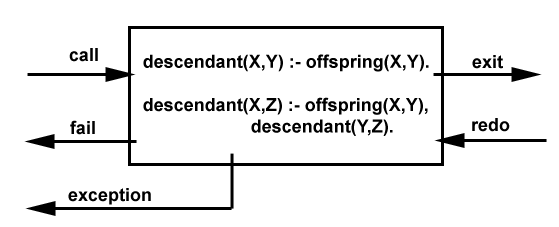
<style>
.page{position:relative;width:559px;height:227px;background:#ffffff}
.page>*{position:absolute;margin:0}
.t1{font:18px "Arial-BoldMT";color:#000000}
</style>
<div class="page">
<p class="t1" style="left:69px;top:48px;width:29px;height:14px">call</p>
<p class="t1" style="left:143px;top:54px;width:286px;height:82px">descendant(X,Y) :- offspring(X,Y).<br><br>descendant(X,Z) :- offspring(X,Y),<br>   descendant(Y,Z).</p>
<p class="t1" style="left:472px;top:55px;width:31px;height:14px">exit</p>
<p class="t1" style="left:70px;top:120px;width:25px;height:15px">fail</p>
<p class="t1" style="left:472px;top:118px;width:38px;height:14px">redo</p>
<p class="t1" style="left:68px;top:188px;width:83px;height:17px">exception</p>
</div>
